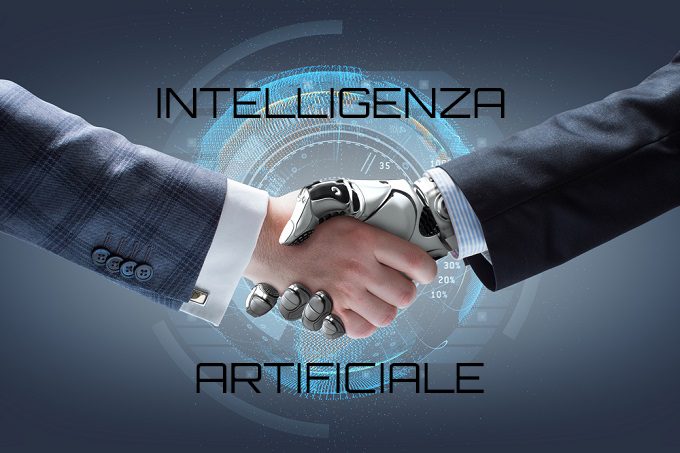
<style>
.page{position:relative;width:680px;height:453px}
.page>*{position:absolute;margin:0}
.t1{font:41.7px "Orbitron-Regular";color:#000000}
</style>
<div class="page">
<p class="t1" style="left:157px;top:88px;width:348px;height:30px">INTELLIGENZA</p>
<p class="t1" style="left:196px;top:363px;width:288px;height:30px">ARTIFICIALE</p>
</div>
